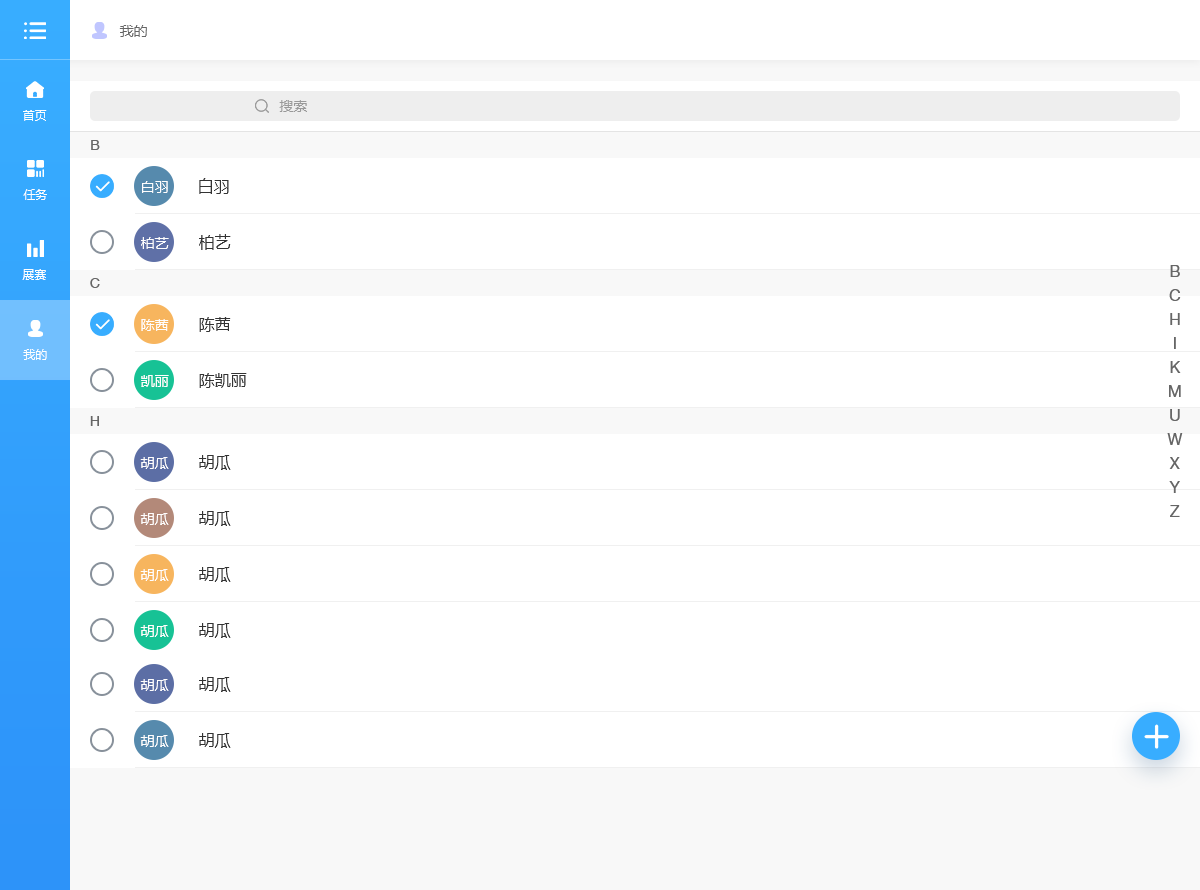
<style>
.page{position:relative;width:1200px;height:890px;background:#ffffff}
.page>*{position:absolute;margin:0}
.t1{font:14px "MicrosoftYaHei";color:#666666}
.t2{font:14px "MicrosoftYaHei";color:#999999}
.t3{font:12px "MicrosoftYaHei";color:#ffffff}
.t4{font:14px "HelveticaNeueLTPro-Roman";color:#666666}
.t5{font:14px "MicrosoftYaHei";color:#fffefe}
.t6{font:16px "MicrosoftYaHei";color:#333333}
.t7{font:16px/24px "HelveticaNeueLTPro-Roman";color:#666666}
</style>
<div class="page">
<p class="t1" style="left:119px;top:25px;width:28px;height:12px">我的</p>
<p class="t2" style="left:279px;top:100px;width:28px;height:12px">搜索</p>
<p class="t3" style="left:23px;top:110px;width:24px;height:11px">首页</p>
<p class="t4" style="left:91px;top:140px;width:9px;height:10px">B</p>
<p class="t5" style="left:142px;top:181px;width:26px;height:12px">白羽</p>
<p class="t6" style="left:199px;top:178px;width:30px;height:16px">白羽</p>
<p class="t3" style="left:23px;top:189px;width:24px;height:11px">任务</p>
<p class="t5" style="left:141px;top:237px;width:28px;height:12px">柏艺</p>
<p class="t6" style="left:199px;top:234px;width:32px;height:16px">柏艺</p>
<p class="t3" style="left:22px;top:269px;width:24px;height:11px">展赛</p>
<p class="t7" style="left:1167px;top:265px;width:16px;height:252px;text-align:center">B<br>C<br>H<br>I<br>K<br>M<br>U<br>W<br>X<br>Y<br>Z</p>
<p class="t4" style="left:90px;top:278px;width:10px;height:10px">C</p>
<p class="t6" style="left:199px;top:317px;width:32px;height:15px">陈茜</p>
<p class="t5" style="left:141px;top:319px;width:28px;height:12px">陈茜</p>
<p class="t3" style="left:23px;top:349px;width:24px;height:11px">我的</p>
<p class="t5" style="left:141px;top:375px;width:28px;height:12px">凯丽</p>
<p class="t6" style="left:199px;top:373px;width:48px;height:15px">陈凯丽</p>
<p class="t4" style="left:90px;top:416px;width:9px;height:10px">H</p>
<p class="t5" style="left:140px;top:457px;width:29px;height:12px">胡瓜</p>
<p class="t6" style="left:199px;top:455px;width:32px;height:15px">胡瓜</p>
<p class="t5" style="left:140px;top:513px;width:29px;height:12px">胡瓜</p>
<p class="t6" style="left:199px;top:511px;width:32px;height:15px">胡瓜</p>
<p class="t5" style="left:140px;top:569px;width:29px;height:12px">胡瓜</p>
<p class="t6" style="left:199px;top:567px;width:32px;height:15px">胡瓜</p>
<p class="t5" style="left:140px;top:625px;width:29px;height:12px">胡瓜</p>
<p class="t6" style="left:199px;top:623px;width:32px;height:15px">胡瓜</p>
<p class="t6" style="left:199px;top:677px;width:32px;height:15px">胡瓜</p>
<p class="t5" style="left:140px;top:679px;width:29px;height:12px">胡瓜</p>
<p class="t5" style="left:140px;top:735px;width:29px;height:12px">胡瓜</p>
<p class="t6" style="left:199px;top:733px;width:32px;height:15px">胡瓜</p>
</div>
